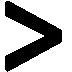
<style>
.page{position:relative;width:72px;height:72px;background:#ffffff}
.page>*{position:absolute;margin:0}
.t1{font:140px "ArialMT";color:#000000;font-weight:bold;scale:0.8 1}
</style>
<div class="page">
<p class="t1" style="left:5px;top:1px;width:57px;height:71px">&gt;</p>
</div>
